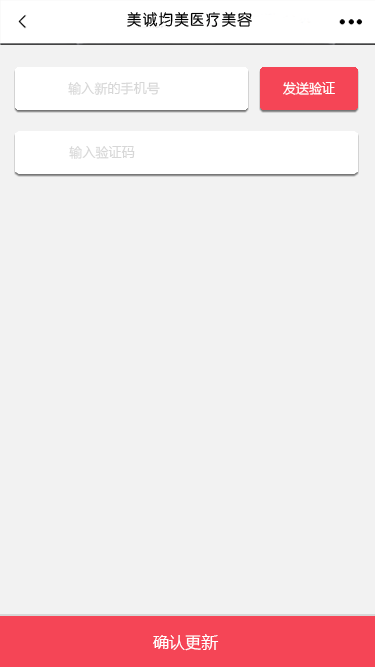
<style>
.page{position:relative;width:375px;height:667px;background:#f2f2f2}
.page>*{position:absolute;margin:0}
.t1{font:13px "MicrosoftYaHei";letter-spacing:0.005em;color:#d7d7d7}
.t2{font:13px "MicrosoftYaHei";letter-spacing:0.005em;color:#ffffff}
.t3{font:16px "MicrosoftYaHei";letter-spacing:0.005em;color:#ffffff}
.t4{font:16.7px "MicrosoftYaHei";letter-spacing:0.005em;color:#ffffff}
</style>
<div class="page">
<p class="t1" style="left:68px;top:82px;width:92px;height:13px">输入新的手机号</p>
<p class="t2" style="left:283px;top:81px;width:52px;height:14px">发送验证</p>
<p class="t1" style="left:69px;top:146px;width:66px;height:13px">输入验证码</p>
<p class="t3" style="left:153px;top:635px;width:48px;height:16px">确认更</p>
<p class="t4" style="left:201px;top:634px;width:18px;height:16px">新</p>
</div>
